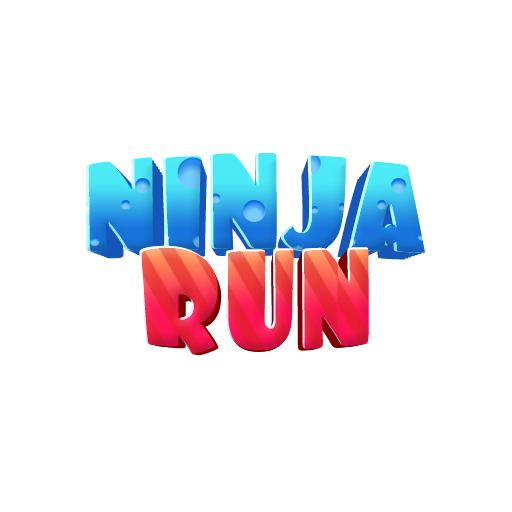
<style>
.page{position:relative;width:512px;height:512px;background:#ffffff}
.page>*{position:absolute;margin:0}
.t1{font:125px "Foo-Regular";letter-spacing:-0.01em}
.t2{font:122.5px "Foo-Regular";letter-spacing:-0.01em}
.t3{font:120.1px "Foo-Regular";letter-spacing:-0.01em}
.t4{font:117.6px "Foo-Regular";letter-spacing:-0.01em}
.t5{font:115.3px "Foo-Regular";letter-spacing:-0.01em}
.t6{font:113px "Foo-Regular";letter-spacing:-0.01em}
.t7{font:110.7px "Foo-Regular";letter-spacing:-0.01em}
.t8{font:137.5px "Foo-Regular";letter-spacing:-0.005em;scale:0.91 1}
.t9{font:134.8px "Foo-Regular";letter-spacing:-0.005em;scale:0.91 1}
.t10{font:132.1px "Foo-Regular";letter-spacing:-0.005em;scale:0.91 1}
.t11{font:129.4px "Foo-Regular";letter-spacing:-0.005em;scale:0.91 1}
.t12{font:126.8px "Foo-Regular";letter-spacing:-0.005em;scale:0.91 1}
.t13{font:124.3px "Foo-Regular";letter-spacing:-0.005em;scale:0.91 1}
</style>
<div class="page">
<p class="t1" style="left:86px;top:153px;width:339px;height:100px">NINJA</p>
<p class="t2" style="left:89px;top:156px;width:333px;height:98px">NINJA</p>
<p class="t3" style="left:92px;top:159px;width:327px;height:96px">NINJA</p>
<p class="t4" style="left:95px;top:162px;width:320px;height:95px">NINJA</p>
<p class="t5" style="left:99px;top:165px;width:313px;height:93px">NINJA</p>
<p class="t6" style="left:102px;top:168px;width:307px;height:91px">NINJA</p>
<p class="t7" style="left:105px;top:171px;width:301px;height:89px">NINJA</p>
<p class="t8" style="left:139px;top:245px;width:230px;height:110px">RUN</p>
<p class="t9" style="left:141px;top:248px;width:226px;height:107px">RUN</p>
<p class="t10" style="left:144px;top:250px;width:221px;height:105px">RUN</p>
<p class="t11" style="left:146px;top:252px;width:216px;height:103px">RUN</p>
<p class="t12" style="left:148px;top:255px;width:212px;height:100px">RUN</p>
<p class="t13" style="left:150px;top:257px;width:208px;height:99px">RUN</p>
</div>
